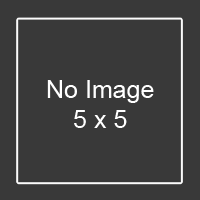
<style>
.page{position:relative;width:200px;height:200px;background:#393939}
.page>*{position:absolute;margin:0}
.t1{font:25px "ArialMT";color:#ffffff}
</style>
<div class="page">
<p class="t1" style="left:47px;top:80px;width:107px;height:48px;text-align:center">No Image<br>5 x 5</p>
</div>
